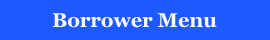
<style>
.page{position:relative;width:270px;height:40px;background:#1e59ff}
.page>*{position:absolute;margin:0}
.t1{font:20px "Georgia-Bold";color:#fbfaff}
</style>
<div class="page">
<p class="t1" style="left:52px;top:13px;width:165px;height:15px">Borrower Menu</p>
</div>
